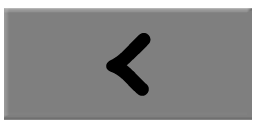
<style>
.page{position:relative;width:256px;height:128px;background:#7f7f7f}
.page>*{position:absolute;margin:0}
.t1{font:148px "ComicSansMS";color:#000000}
</style>
<div class="page">
<p class="t1" style="left:106px;top:33px;width:45px;height:63px">&lt;</p>
</div>
